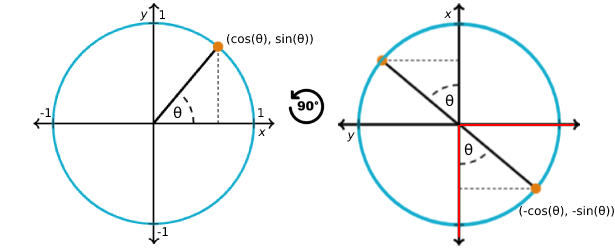
<style>
.page{position:relative;width:615px;height:250px;background:#ffffff}
.page>*{position:absolute;margin:0}
.t1{font:12px "DejaVuSans-Oblique";color:#000000}
.t2{font:12px "DejaVuSans";color:#000000}
.t3{font:15px "DejaVuSans";color:#000000}
</style>
<div class="page">
<p class="t1" style="left:140px;top:11px;width:8px;height:10px">y</p>
<p class="t2" style="left:159px;top:10px;width:7px;height:9px">1</p>
<p class="t1" style="left:444px;top:11px;width:8px;height:7px">x</p>
<p class="t2" style="left:227px;top:33px;width:86px;height:12px">(cos(θ), sin(θ))</p>
<p class="t3" style="left:445px;top:94px;width:9px;height:13px">θ</p>
<p class="t2" style="left:40px;top:108px;width:11px;height:9px">-1</p>
<p class="t3" style="left:173px;top:106px;width:9px;height:13px">θ</p>
<p class="t2" style="left:258px;top:108px;width:6px;height:9px">1</p>
<p class="t1" style="left:258px;top:129px;width:8px;height:7px">x</p>
<p class="t1" style="left:347px;top:132px;width:8px;height:10px">y</p>
<p class="t3" style="left:464px;top:143px;width:9px;height:13px">θ</p>
<p class="t2" style="left:519px;top:205px;width:95px;height:12px">(-cos(θ), -sin(θ))</p>
<p class="t2" style="left:157px;top:227px;width:11px;height:9px">-1</p>
</div>
